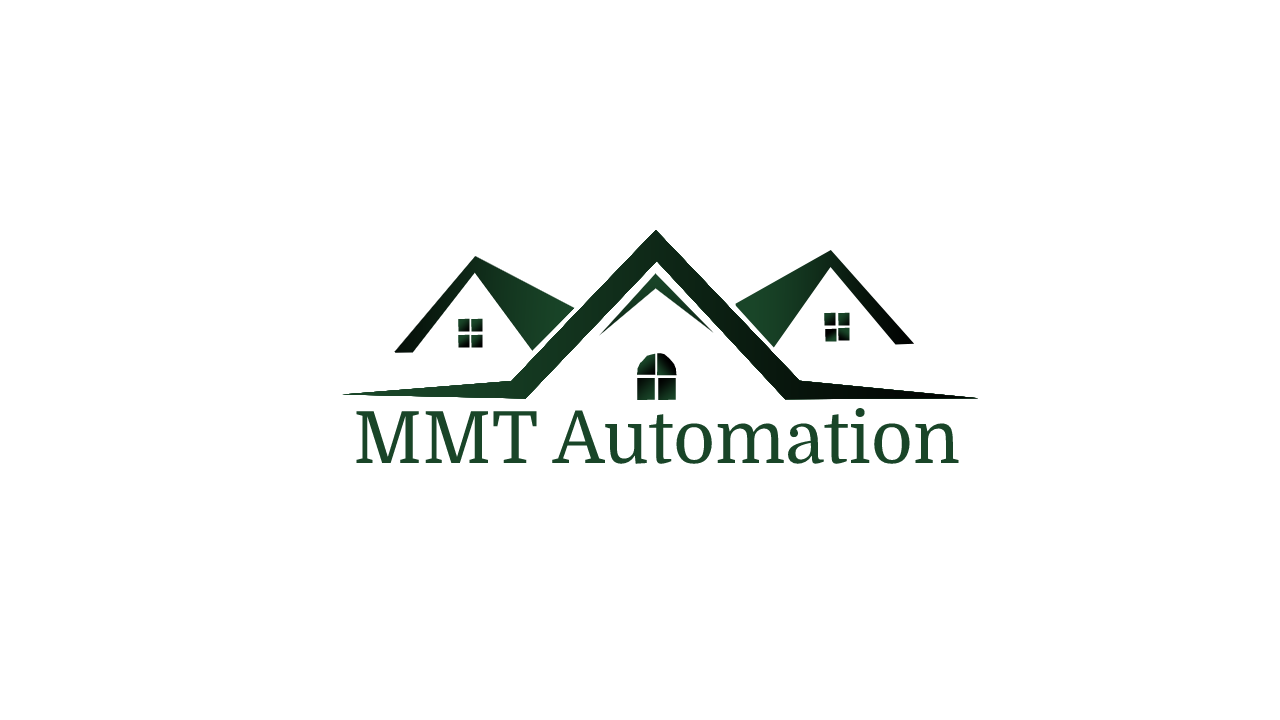
<style>
.page{position:relative;width:1280px;height:720px;background:#ffffff}
.page>*{position:absolute;margin:0}
.t1{font:72px "Domine-Regular";color:#194528}
</style>
<div class="page">
<p class="t1" style="left:356px;top:407px;width:603px;height:57px">MMT Automation</p>
</div>
